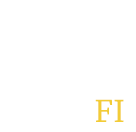
<style>
.page{position:relative;width:136px;height:132px;background:#ffffff}
.page>*{position:absolute;margin:0}
.t1{font:29.7px "Merriweather-Regular";color:#f2cc37}
</style>
<div class="page">
<p class="t1" style="left:95px;top:99px;width:29px;height:23px">FI</p>
</div>
